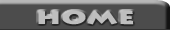
<style>
.page{position:relative;width:170px;height:30px;background:#4c4c4c}
.page>*{position:absolute;margin:0}
.t1{font:18px "Lithograph-Bold";color:#bebebe;scale:1.56 1}
</style>
<div class="page">
<p class="t1" style="left:38px;top:11px;width:96px;height:14px">Home</p>
</div>
